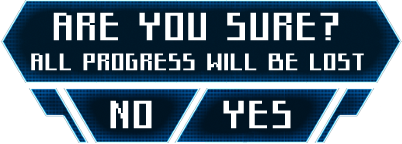
<style>
.page{position:relative;width:402px;height:144px;background:#ffffff}
.page>*{position:absolute;margin:0}
.t1{font:36px "Starcadia";color:#ffffff;font-weight:bold}
.t2{font:22px "Starcadia";color:#ffffff;font-weight:bold}
</style>
<div class="page">
<p class="t1" style="left:53px;top:12px;width:286px;height:29px">ARE YOU SURE?</p>
<p class="t2" style="left:31px;top:53px;width:333px;height:18px">ALL PROGRESS WILL BE LOST</p>
<p class="t1" style="left:110px;top:100px;width:42px;height:29px">NO</p>
<p class="t1" style="left:223px;top:100px;width:68px;height:29px">YES</p>
</div>
